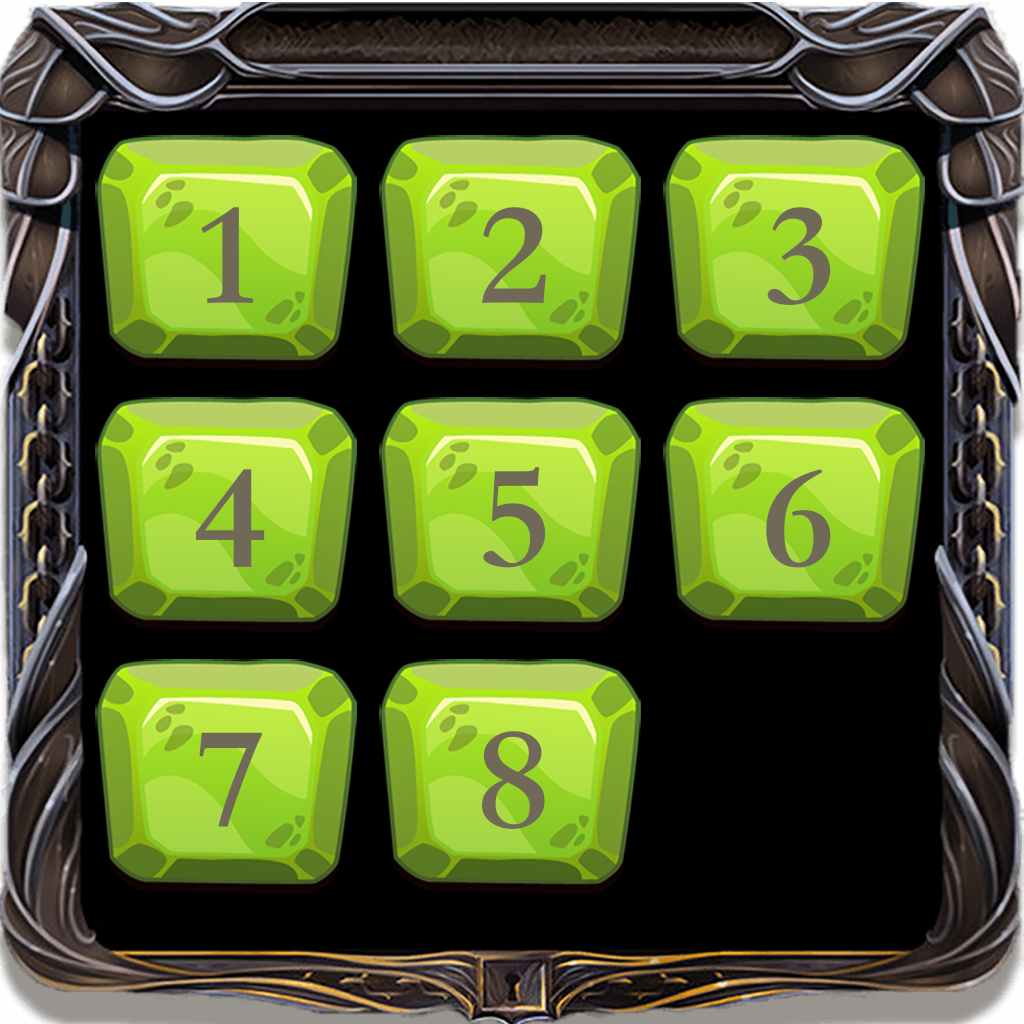
<style>
.page{position:relative;width:1024px;height:1024px;background:#000000}
.page>*{position:absolute;margin:0}
.t1{font:150px "STSongti-SC-Black";color:#706957;scale:1.04 1}
</style>
<div class="page">
<p class="t1" style="left:201px;top:207px;width:53px;height:96px">1</p>
<p class="t1" style="left:482px;top:207px;width:64px;height:96px">2</p>
<p class="t1" style="left:767px;top:207px;width:64px;height:98px">3</p>
<p class="t1" style="left:195px;top:469px;width:70px;height:98px">4</p>
<p class="t1" style="left:483px;top:467px;width:63px;height:101px">5</p>
<p class="t1" style="left:766px;top:469px;width:65px;height:99px">6</p>
<p class="t1" style="left:199px;top:732px;width:63px;height:95px">7</p>
<p class="t1" style="left:481px;top:731px;width:64px;height:98px">8</p>
</div>
